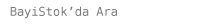
<style>
.page{position:relative;width:200px;height:25px;background:#ffffff}
.page>*{position:absolute;margin:0}
.t1{font:12px "BitstreamVeraSansMono-Roman";color:#787878}
</style>
<div class="page">
<p class="t1" style="left:10px;top:6px;width:107px;height:13px">BayiStok’da Ara</p>
</div>
